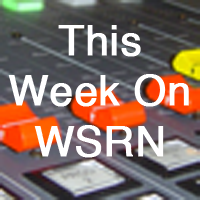
<style>
.page{position:relative;width:200px;height:200px}
.page>*{position:absolute;margin:0}
.t1{font:42px "Helvetica";color:#ffffff;font-weight:bold}
</style>
<div class="page">
<p class="t1" style="left:8px;top:25px;width:181px;height:133px;text-align:center">This<br>Week On<br>WSRN</p>
</div>
